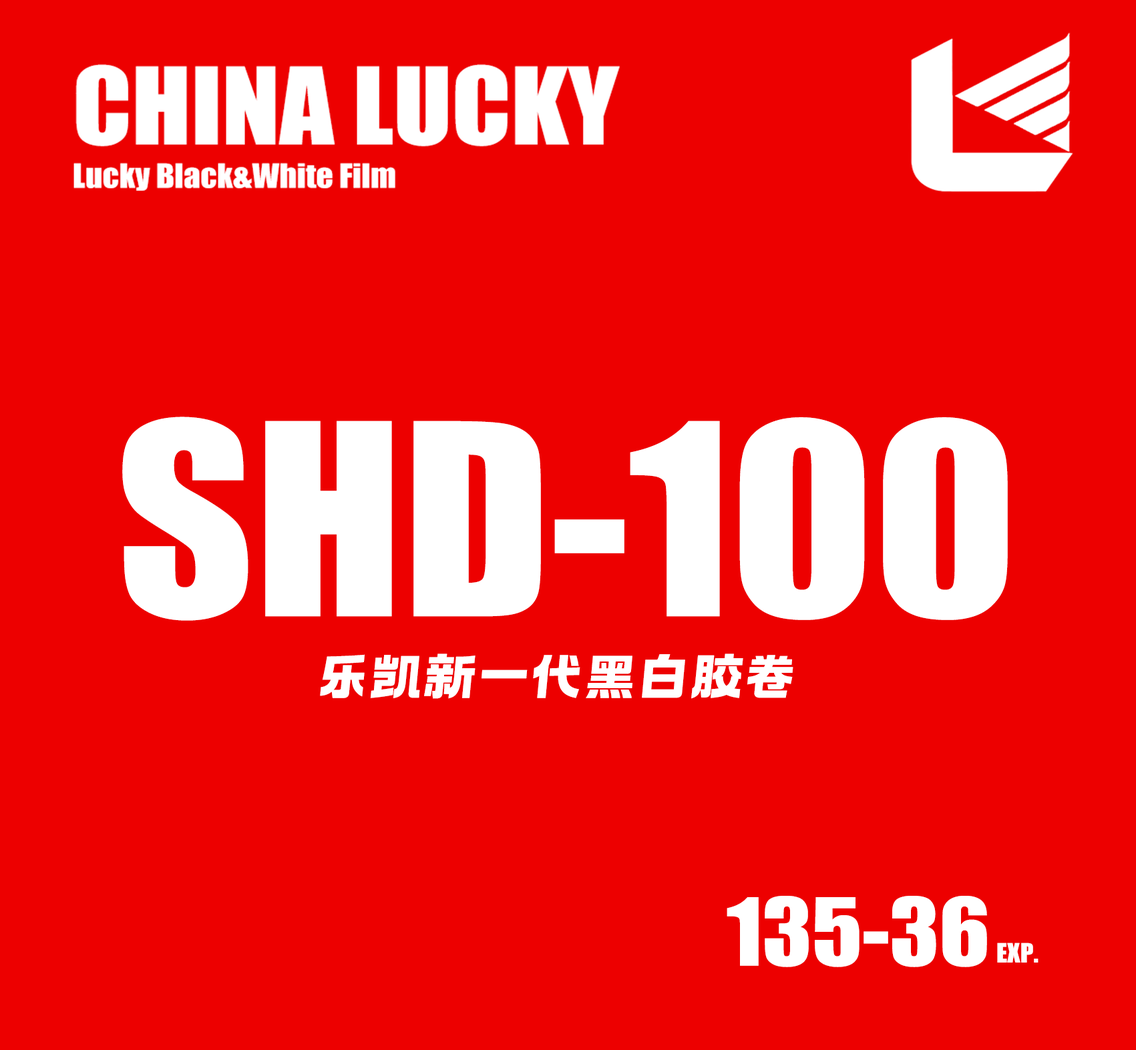
<style>
.page{position:relative;width:1136px;height:1050px;background:#ed0000}
.page>*{position:absolute;margin:0}
.t1{font:246.9px "Impact";color:#ffffff;scale:1.08 1}
.t2{font:49.4px "YEFONTAoYeHei-Regular";color:#ffffff;scale:1.08 1}
.t3{font:86.4px "Impact";color:#ffffff;scale:1.08 1}
.t4{font:24.7px "Impact";color:#ffffff;scale:1.08 1}
</style>
<div class="page">
<p class="t1" style="left:122px;top:417px;width:885px;height:204px">SHD-100</p>
<p class="t2" style="left:320px;top:654px;width:473px;height:45px">乐凯新一代黑白胶卷</p>
<p class="t3" style="left:726px;top:896px;width:261px;height:71px">135-36</p>
<p class="t4" style="left:997px;top:943px;width:41px;height:20px">EXP.</p>
</div>
